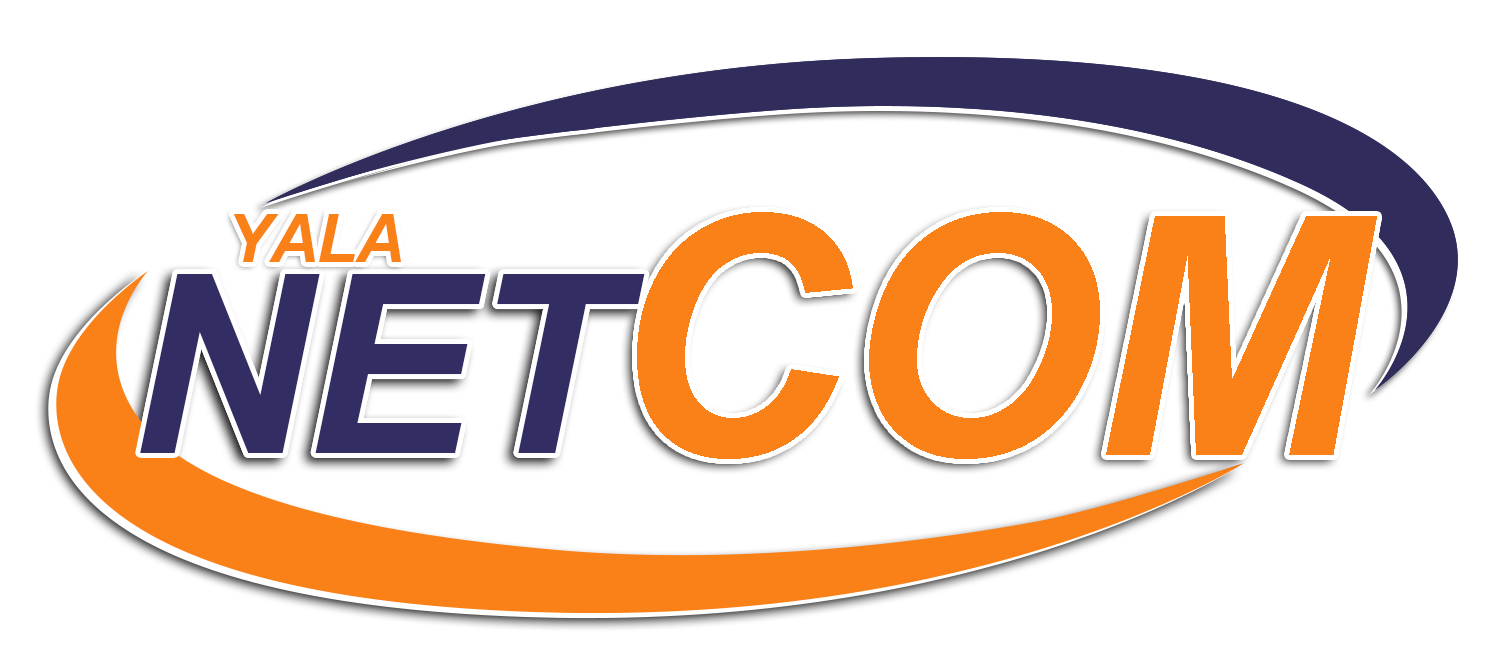
<style>
.page{position:relative;width:1500px;height:668px;background:#ffffff}
.page>*{position:absolute;margin:0}
.t1{font:66.7px "Arial-BoldItalicMT";letter-spacing:-0.02em;color:#fa8018}
.t2{font:333.3px "Arial-BoldItalicMT";letter-spacing:-0.02em;color:#fa8018}
.t3{font:250px "Arial-BoldItalicMT";letter-spacing:-0.02em;color:#322e64}
</style>
<div class="page">
<p class="t1" style="left:233px;top:214px;width:168px;height:48px">YALA</p>
<p class="t2" style="left:637px;top:212px;width:740px;height:247px">COM</p>
<p class="t3" style="left:140px;top:274px;width:505px;height:179px">NET</p>
<p class="t3" style="left:140px;top:274px;width:505px;height:179px">NET</p>
</div>
